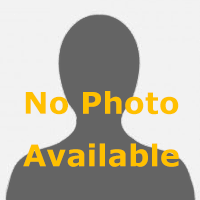
<style>
.page{position:relative;width:200px;height:200px;background:#f2f2f2}
.page>*{position:absolute;margin:0}
.t1{font:30px "Verdana-Bold";letter-spacing:0.01em;color:#ffc000}
</style>
<div class="page">
<p class="t1" style="left:23px;top:91px;width:156px;height:76px">No Photo<br>Available</p>
</div>
